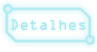
<style>
.page{position:relative;width:97px;height:52px}
.page>*{position:absolute;margin:0}
.t1{font:13.3px "OCRAStd";color:#a8e8ee}
</style>
<div class="page">
<p class="t1" style="left:11px;top:19px;width:75px;height:11px">Detalhes</p>
</div>
